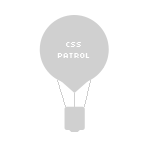
<style>
.page{position:relative;width:150px;height:150px;background:#ffffff}
.page>*{position:absolute;margin:0}
.t1{font:8px/11px "04b03";letter-spacing:0.1em;color:#ffffff;text-transform:uppercase}
</style>
<div class="page">
<p class="t1" style="left:57px;top:42px;width:33px;height:16px;text-align:center">CSS<br>PATROL</p>
</div>
